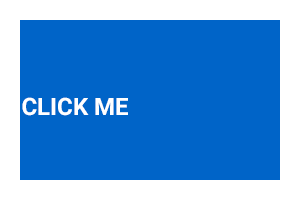
<style>
.page{position:relative;width:300px;height:200px;background:#0064c8}
.page>*{position:absolute;margin:0}
.t1{font:24px "Roboto-Bold";color:#ffffff}
</style>
<div class="page">
<p class="t1" style="left:22px;top:97px;width:106px;height:19px">CLICK ME</p>
</div>
